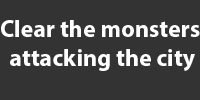
<style>
.page{position:relative;width:200px;height:100px;background:#333333}
.page>*{position:absolute;margin:0}
.t1{font:24px "MyriadPro-Bold";color:#ffffff}
</style>
<div class="page">
<p class="t1" style="left:1px;top:20px;width:199px;height:51px;text-align:center">Clear the monsters <br>attacking the city</p>
</div>
